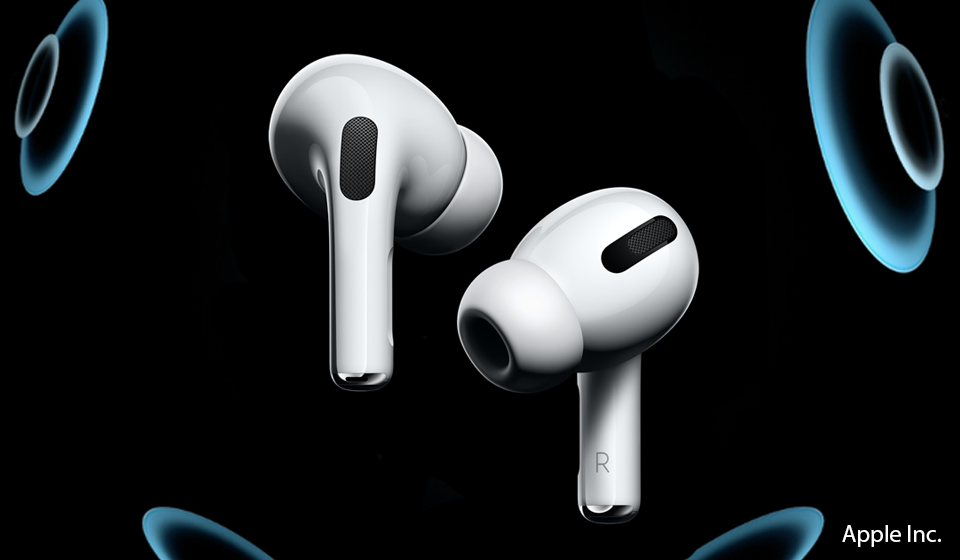
<style>
.page{position:relative;width:960px;height:560px;background:#000000}
.page>*{position:absolute;margin:0}
.t1{font:24px "MyriadPro-Regular";color:#ffffff}
</style>
<div class="page">
<p class="t1" style="left:842px;top:525px;width:99px;height:22px">Apple Inc.</p>
</div>
